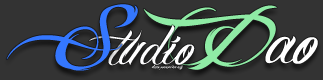
<style>
.page{position:relative;width:323px;height:80px;background:#333333}
.page>*{position:absolute;margin:0}
.t1{font:130px "BILLYARGELFONT";color:#3477ff}
.t2{font:130px "BILLYARGELFONT";color:#ffffff}
.t3{font:130px "BILLYARGELFONT";color:#8feba5}
.t4{font:100px "BILLYARGELFONT";color:#fefeff}
.t5{font:48px "BILLYARGELFONT";color:#9cc1ff}
</style>
<div class="page">
<p class="t1" style="left:6px;top:4px;width:132px;height:67px">S</p>
<p class="t2" style="left:143px;top:5px;width:175px;height:65px"><span class="t3">D</span>ao</p>
<p class="t4" style="left:88px;top:25px;width:107px;height:45px"><span class="t5">     </span>tudio</p>
</div>
